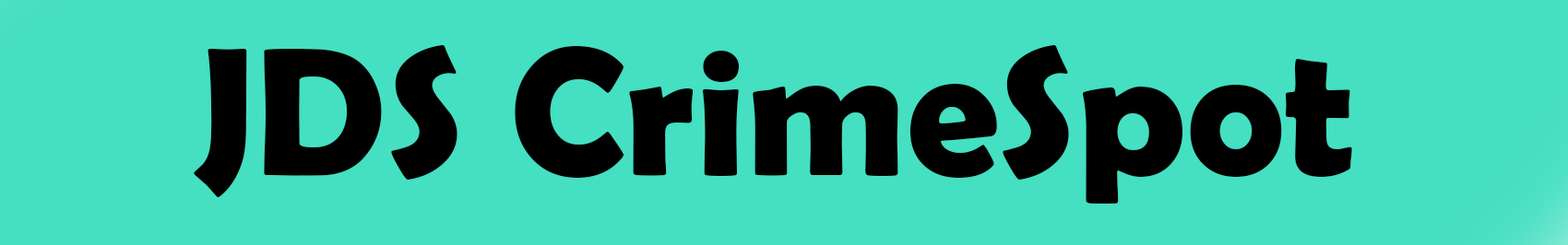
<style>
.page{position:relative;width:1568px;height:245px;background:#45dfc1}
.page>*{position:absolute;margin:0}
.t1{font:184.5px "BerlinSansFBDemi-Bold";color:#000000}
</style>
<div class="page">
<p class="t1" style="left:194px;top:45px;width:1158px;height:159px">JDS CrimeSpot</p>
</div>
